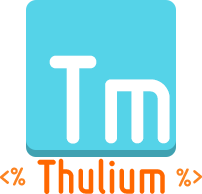
<style>
.page{position:relative;width:202px;height:194px;background:#55d3e8}
.page>*{position:absolute;margin:0}
.t1{font:131px "Miso-Bold";color:#ffffff}
.t2{font:51px "Miso-Bold";color:#ff6700}
.t3{font:27px "Miso-Bold";color:#fb8321}
</style>
<div class="page">
<p class="t1" style="left:49px;top:55px;width:121px;height:89px">Tm</p>
<p class="t2" style="left:37px;top:158px;width:128px;height:36px">Thulium</p>
<p class="t3" style="left:0px;top:167px;width:26px;height:19px">&lt;%</p>
<p class="t3" style="left:176px;top:168px;width:27px;height:19px;rotate:180deg">&lt;%</p>
</div>
